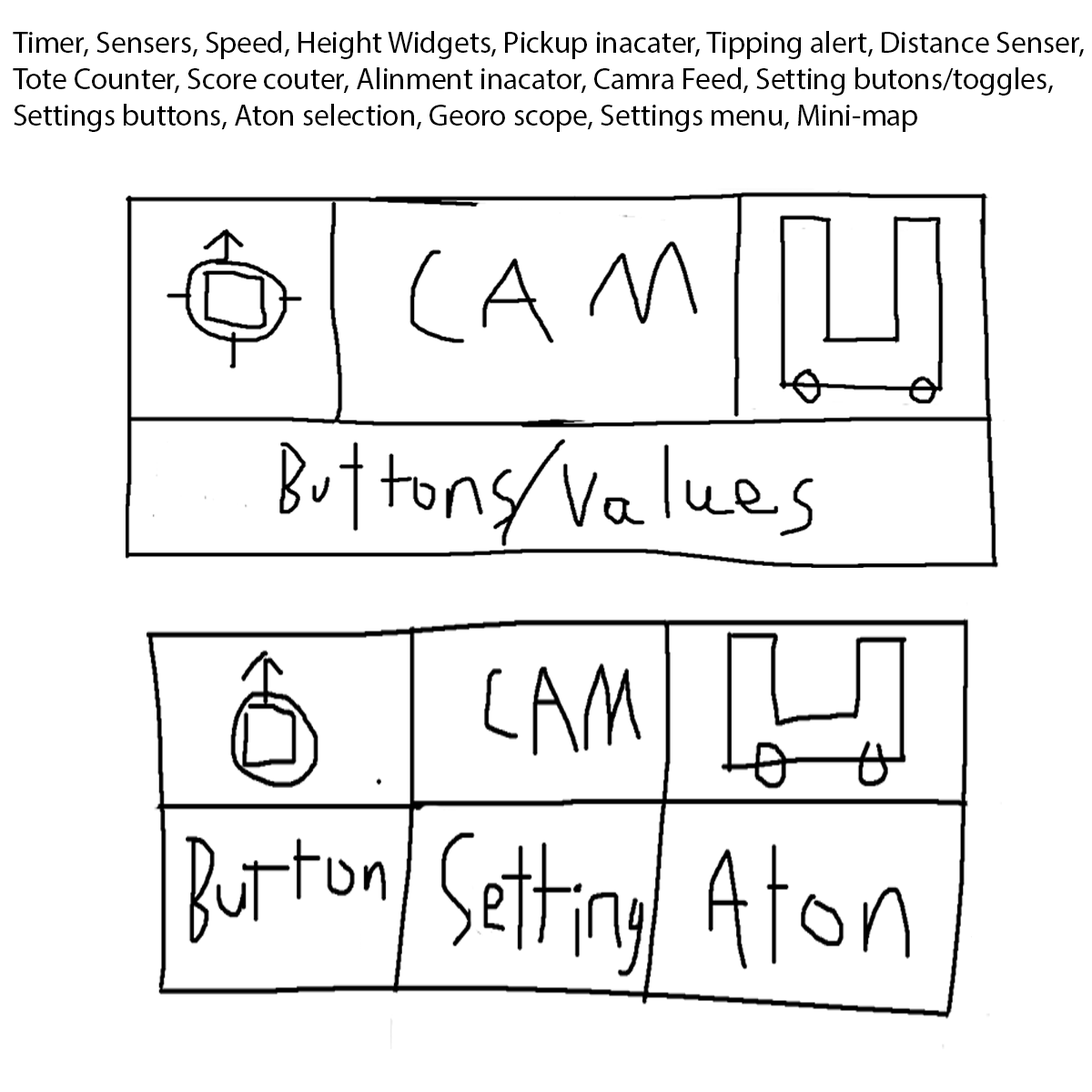
<style>
.page{position:relative;width:1092px;height:1092px;background:#ffffff}
.page>*{position:absolute;margin:0}
.t1{font:30.3px "MyriadPro-Regular";color:#000000}
</style>
<div class="page">
<p class="t1" style="left:13px;top:31px;width:1071px;height:101px">Timer, Sensers, Speed, Height Widgets, Pickup inacater, Tipping alert, Distance Senser,<br>Tote Counter, Score couter, Alinment inacator, Camra Feed, Setting butons/toggles,<br>Settings buttons, Aton selection, Georo scope, Settings menu, Mini-map</p>
</div>
